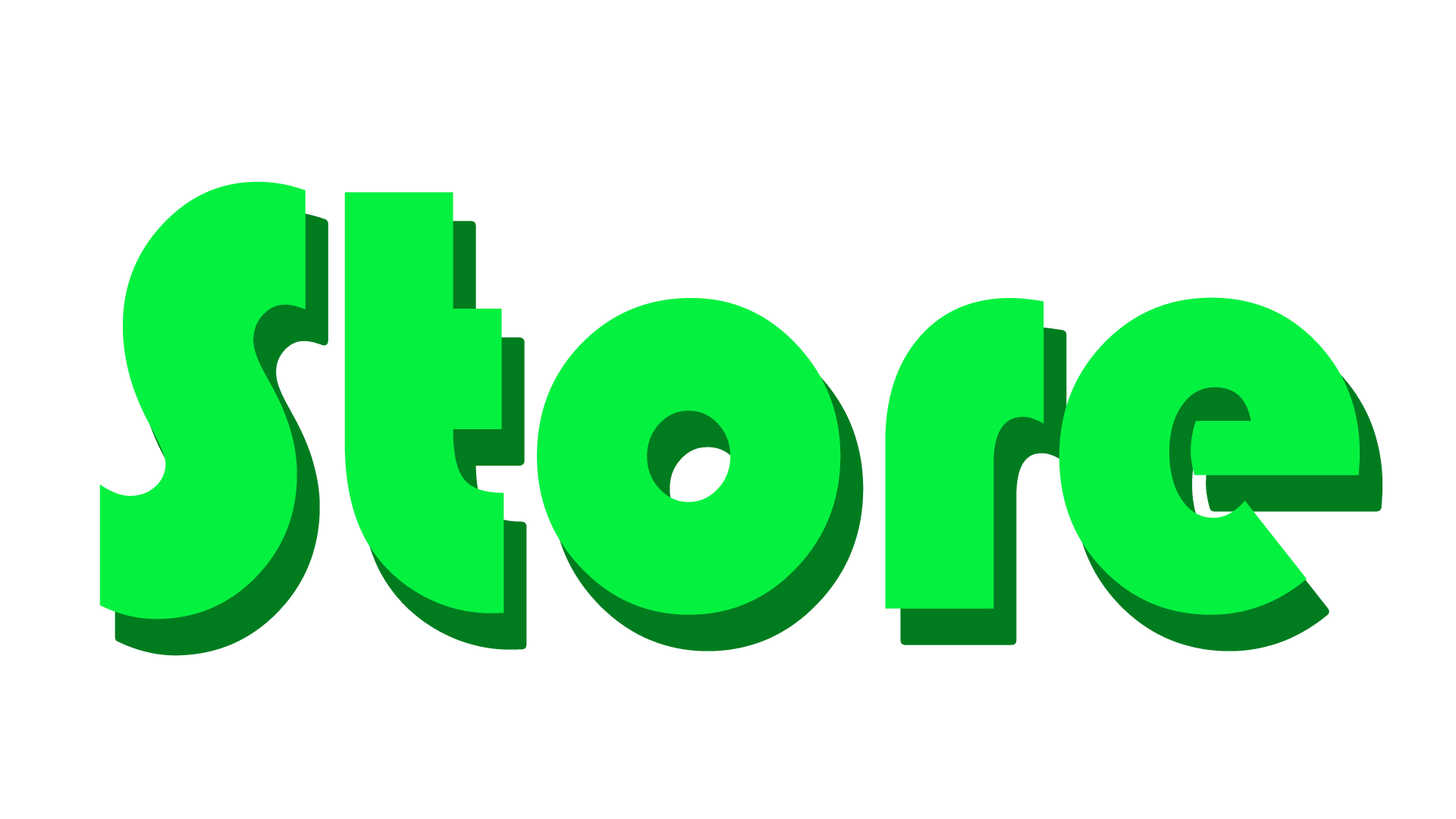
<style>
.page{position:relative;width:1456px;height:819px;background:#ffffff}
.page>*{position:absolute;margin:0}
.t1{font:624.5px "Bauhaus93";color:#05f140;scale:0.95 1}
</style>
<div class="page">
<p class="t1" style="left:99px;top:181px;width:1261px;height:439px">Store</p>
</div>
